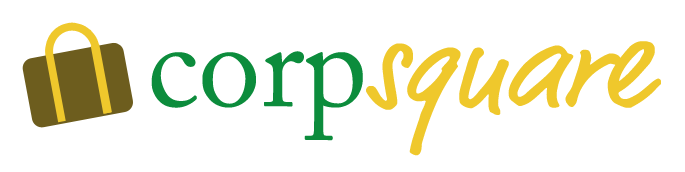
<style>
.page{position:relative;width:685px;height:172px;background:#ffffff}
.page>*{position:absolute;margin:0}
.t1{font:125px "MarketWeb";color:#efc82c}
.t2{font:125px "ACaslonPro-Regular";color:#0c8c3c}
</style>
<div class="page">
<p class="t1" style="left:151px;top:41px;width:510px;height:115px"><span class="t2">corp</span>square</p>
</div>
